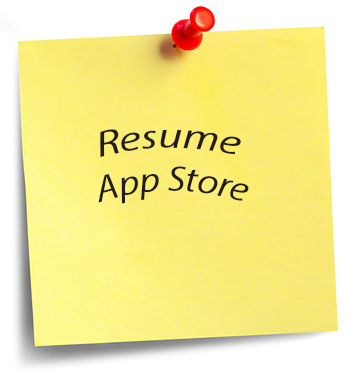
<style>
.page{position:relative;width:348px;height:374px}
.page>*{position:absolute;margin:0}
.t1{font:36px "MyriadPro-It";color:#221c1c}
</style>
<div class="page">
<p class="t1" style="left:98px;top:129px;width:151px;height:75px;text-align:center">Resume <br>App Store</p>
</div>
